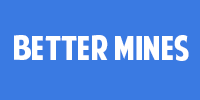
<style>
.page{position:relative;width:200px;height:100px;background:#3a7ae2}
.page>*{position:absolute;margin:0}
.t1{font:33.3px "AmericanPurpose";color:#ffffff}
</style>
<div class="page">
<p class="t1" style="left:14px;top:35px;width:175px;height:26px">Better Mines</p>
</div>
